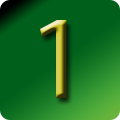
<style>
.page{position:relative;width:120px;height:120px;background:#00601b}
.page>*{position:absolute;margin:0}
.t1{font:120px "MyriadPro-Regular"}
</style>
<div class="page">
<p class="t1" style="left:40px;top:20px;width:27px;height:78px">1</p>
</div>
